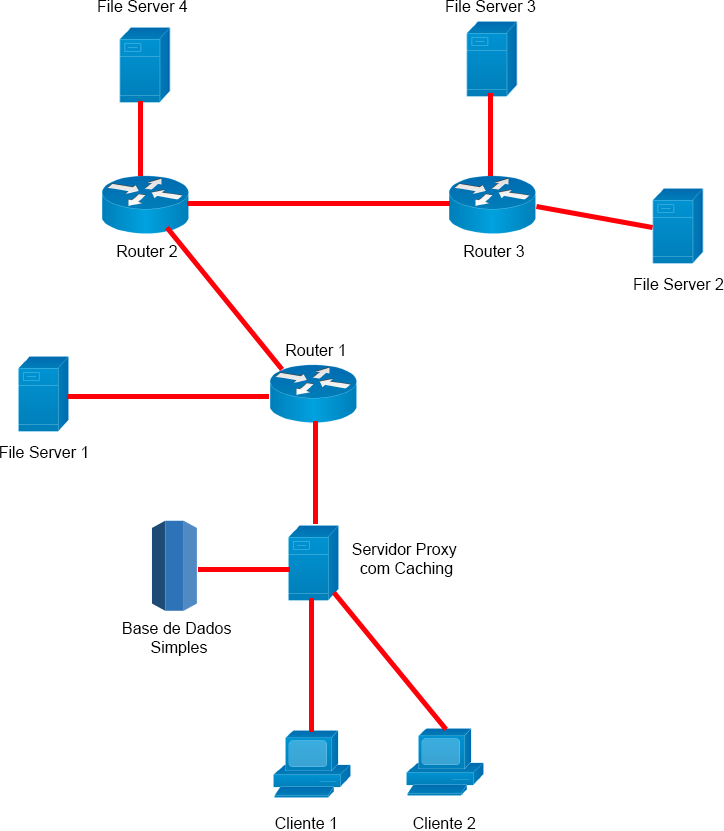
<style>
.page{position:relative;width:724px;height:831px;background:#ffffff}
.page>*{position:absolute;margin:0}
.t1{font:16px "ArialMT";color:#000000}
</style>
<div class="page">
<p class="t1" style="left:98px;top:0px;width:90px;height:12px">File Server 4</p>
<p class="t1" style="left:446px;top:0px;width:90px;height:12px">File Server 3</p>
<p class="t1" style="left:117px;top:245px;width:60px;height:12px">Router 2</p>
<p class="t1" style="left:464px;top:245px;width:60px;height:12px">Router 3</p>
<p class="t1" style="left:634px;top:278px;width:90px;height:12px">File Server 2</p>
<p class="t1" style="left:286px;top:344px;width:58px;height:12px">Router 1</p>
<p class="t1" style="left:0px;top:446px;width:87px;height:12px">File Server 1</p>
<p class="t1" style="left:352px;top:543px;width:105px;height:34px;text-align:center">Servidor Proxy <br>com Caching</p>
<p class="t1" style="left:123px;top:622px;width:108px;height:34px;text-align:center">Base de Dados <br>Simples</p>
<p class="t1" style="left:275px;top:817px;width:61px;height:12px">Cliente 1</p>
<p class="t1" style="left:413px;top:817px;width:63px;height:12px">Cliente 2</p>
</div>
